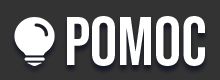
<style>
.page{position:relative;width:220px;height:80px;background:#333333}
.page>*{position:absolute;margin:0}
.t1{font:67.9px "BebasNeue-Regular";color:#ffffff}
</style>
<div class="page">
<p class="t1" style="left:67px;top:16px;width:138px;height:50px">POMOC</p>
</div>
